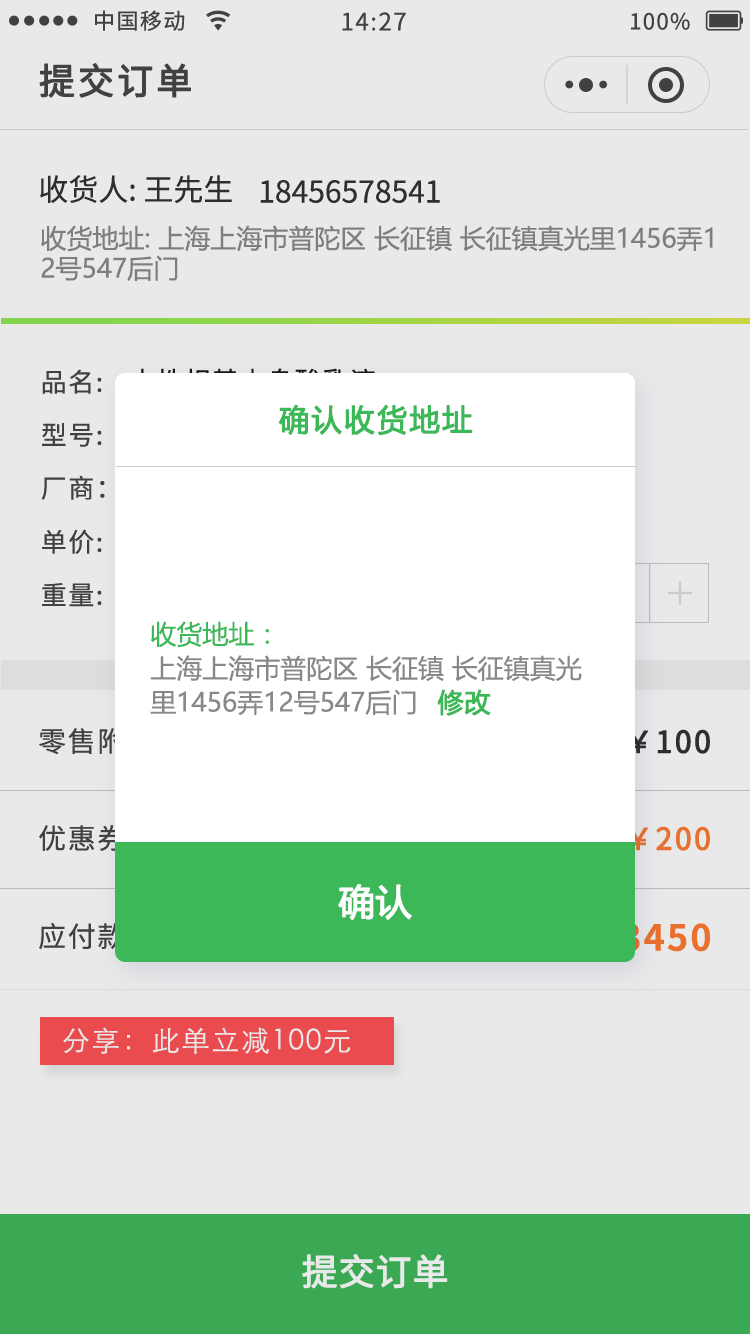
<style>
.page{position:relative;width:750px;height:1334px;background:#e9e9e9}
.page>*{position:absolute;margin:0}
.t1{font:22px "NotoSansCJKsc-Regular";letter-spacing:0.06em;color:#444444}
.t2{font:24px "NotoSansCJKsc-Regular";letter-spacing:0.06em;color:#444444}
.t3{font:36px "NotoSansCJKsc-Regular";letter-spacing:0.06em;color:#444444;font-weight:bold}
.t4{font:30px "NotoSansCJKsc-Regular";color:#302f2f}
.t5{font:26px/30px "MicrosoftYaHei";color:#888888}
.t6{font:26px "NotoSansCJKsc-Regular";letter-spacing:0.06em;color:#444444}
.t7{font:30px "MicrosoftYaHei";letter-spacing:0.06em;color:#3db858;font-weight:bold}
.t8{font:26px/34px "MicrosoftYaHei";color:#888888}
.t9{font:26px/34px "MicrosoftYaHei";color:#3db858}
.t10{font:26px "MicrosoftYaHei";color:#3db858;font-weight:bold}
.t11{font:28px "NotoSansCJKsc-Regular";letter-spacing:0.06em}
.t12{font:30px "NotoSansCJKsc-Regular";letter-spacing:0.06em;color:#302f2f;font-weight:bold}
.t13{font:28px "NotoSansCJKsc-Regular";letter-spacing:0.06em;color:#444444}
.t14{font:30px "NotoSansCJKsc-Regular";letter-spacing:0.06em;color:#ff782f;font-weight:bold}
.t15{font:36px "MicrosoftYaHei";color:#ffffff;font-weight:bold}
.t16{font:36px "NotoSansCJKsc-Bold";letter-spacing:0.06em}
.t17{font:28px "STXihei";letter-spacing:0.06em;color:#ffffff}
.t18{font:36px "NotoSansCJKsc-Regular";color:#ffffff;font-weight:bold}
</style>
<div class="page">
<p class="t1" style="left:95px;top:10px;width:90px;height:21px">中国移动</p>
<p class="t2" style="left:342px;top:12px;width:64px;height:19px">14:27</p>
<p class="t1" style="left:631px;top:12px;width:59px;height:18px">100%</p>
<p class="t3" style="left:39px;top:63px;width:152px;height:35px">提交订单</p>
<p class="t4" style="left:40px;top:175px;width:192px;height:28px">收货人: 王先生</p>
<p class="t4" style="left:260px;top:180px;width:180px;height:23px">18456578541</p>
<p class="t5" style="left:41px;top:225px;width:672px;height:56px">收货地址: 上海上海市普陀区 长征镇 长征镇真光里1456弄1<br>2号547后门</p>
<p class="t6" style="left:42px;top:369px;width:60px;height:25px">品名:</p>
<p class="t7" style="left:278px;top:404px;width:195px;height:32px">确认收货地址</p>
<p class="t6" style="left:42px;top:423px;width:60px;height:24px">型号:</p>
<p class="t6" style="left:41px;top:475px;width:64px;height:25px">厂商：</p>
<p class="t6" style="left:42px;top:529px;width:60px;height:25px">单价:</p>
<p class="t6" style="left:42px;top:583px;width:60px;height:24px">重量:</p>
<p class="t8" style="left:150px;top:621px;width:432px;height:94px"><span class="t9">收货地址：<br></span>上海上海市普陀区 长征镇 长征镇真光<br>里1456弄12号547后门</p>
<p class="t10" style="left:437px;top:689px;width:54px;height:27px">修改</p>
<p class="t11" style="left:39px;top:727px;width:246px;height:28px">零售附加（十吨免）</p>
<p class="t12" style="left:628px;top:729px;width:82px;height:25px">￥100</p>
<p class="t13" style="left:39px;top:825px;width:86px;height:26px">优惠券</p>
<p class="t14" style="left:611px;top:826px;width:99px;height:25px">-￥200</p>
<p class="t15" style="left:338px;top:884px;width:74px;height:36px">确认</p>
<p class="t13" style="left:39px;top:923px;width:86px;height:27px">应付款</p>
<p class="t16" style="left:587px;top:923px;width:123px;height:29px">￥3450</p>
<p class="t17" style="left:63px;top:1027px;width:288px;height:27px">分享：此单立减100元</p>
<p class="t18" style="left:302px;top:1253px;width:146px;height:36px">提交订单</p>
</div>
